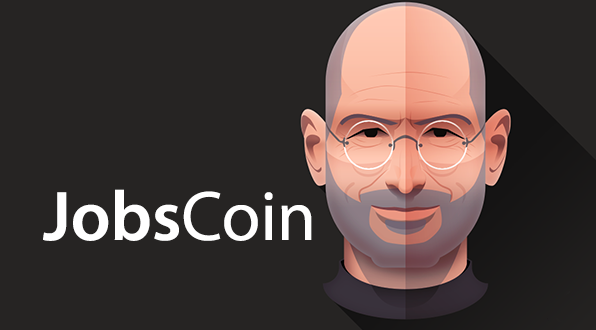
<style>
.page{position:relative;width:596px;height:330px;background:#262423}
.page>*{position:absolute;margin:0}
.t1{font:70.7px "MyriadPro-Semibold";color:#ffffff}
.t2{font:70.7px "MyriadPro-Regular";color:#ffffff}
</style>
<div class="page">
<p class="t1" style="left:43px;top:189px;width:269px;height:52px">Jobs<span class="t2">Coin</span></p>
</div>
